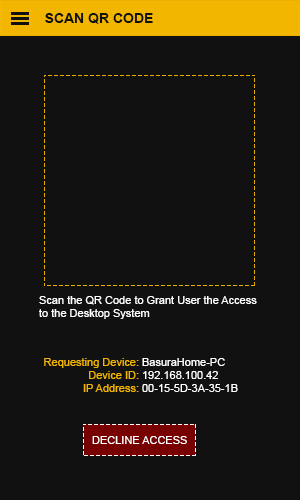
<style>
.page{position:relative;width:300px;height:500px;background:#111111}
.page>*{position:absolute;margin:0}
.t1{font:14px "Arial-BoldMT";color:#111111}
.t2{font:11px "ArialMT";color:#ffffff}
.t3{font:11px "ArialMT";color:#f2b600}
</style>
<div class="page">
<p class="t1" style="left:45px;top:13px;width:108px;height:11px">SCAN QR CODE</p>
<p class="t2" style="left:39px;top:296px;width:218px;height:23px">Scan the QR Code to Grant User the Access<br>to the Desktop System</p>
<p class="t3" style="left:44px;top:358px;width:95px;height:34px;text-align:right">Requesting Device:<br>Device ID:<br>IP Address:</p>
<p class="t2" style="left:142px;top:358px;width:96px;height:34px">BasuraHome-PC<br>192.168.100.42<br>00-15-5D-3A-35-1B</p>
<p class="t2" style="left:92px;top:436px;width:95px;height:8px">DECLINE ACCESS</p>
</div>
